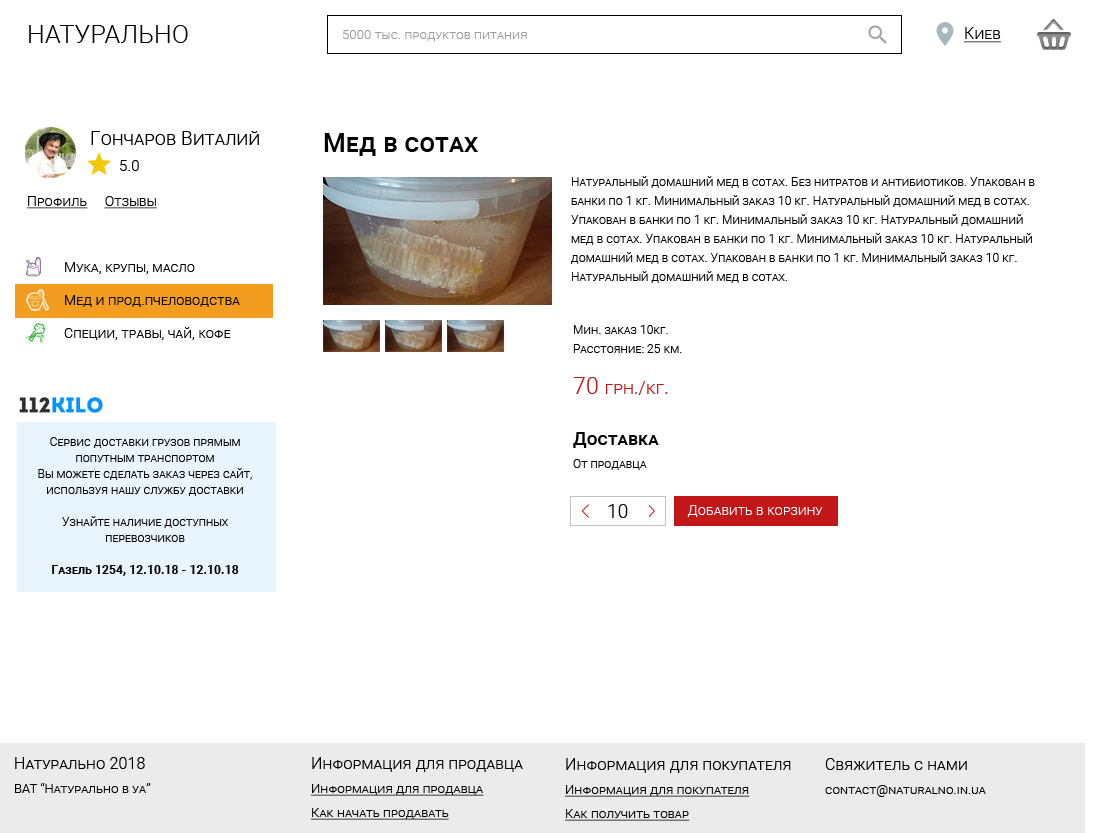
<style>
.page{position:relative;width:1098px;height:833px;background:#ffffff}
.page>*{position:absolute;margin:0}
.t1{font:25px "Roboto-Light";letter-spacing:0.01em;color:#000000;font-variant:small-caps}
.t2{font:13px "Roboto-Light";letter-spacing:0.01em;color:#9d9d9d;font-variant:small-caps}
.t3{font:16px "Roboto-Light";letter-spacing:0.01em;color:#000000;font-variant:small-caps;text-decoration:underline}
.t4{font:19px "Roboto-Light";letter-spacing:0.01em;color:#000000;font-variant:small-caps}
.t5{font:26px "Roboto-Medium";letter-spacing:0.01em;color:#000000;font-variant:small-caps}
.t6{font:15px "Roboto-Light";letter-spacing:0.01em;color:#000000;font-variant:small-caps}
.t7{font:12px/19px "Roboto-Light";letter-spacing:0.01em;color:#000000;font-variant:small-caps}
.t8{font:12px/33px "Roboto-Light";letter-spacing:0.01em;color:#000000;font-variant:small-caps}
.t9{font:14px "Roboto-Light";letter-spacing:0.01em;color:#000000;font-variant:small-caps;text-decoration:underline}
.t10{font:14px/33px "Roboto-Light";letter-spacing:0.01em;color:#000000;font-variant:small-caps}
.t11{font:18px "Roboto-Light";letter-spacing:0.01em;color:#c21719;font-variant:small-caps}
.t12{font:23px "Roboto-Light";letter-spacing:0.01em;color:#c21719;font-variant:small-caps}
.t13{font:12px/16px "Roboto-Light";letter-spacing:0.01em;color:#000000;font-variant:small-caps}
.t14{font:12px/16px "Roboto-Bold";letter-spacing:0.01em;color:#000000;font-variant:small-caps}
.t15{font:12px/23px "Roboto-Light";letter-spacing:0.01em;color:#000000;font-variant:small-caps}
.t16{font:18px/19px "Roboto-Medium";letter-spacing:0.01em;color:#000000;font-variant:small-caps}
.t17{font:14px "Roboto-Light";letter-spacing:0.01em;color:#ffffff;font-variant:small-caps}
.t18{font:13px/24px "Roboto-Light";letter-spacing:0.01em;color:#000000;font-variant:small-caps}
.t19{font:16px/26px "Roboto-Light";letter-spacing:0.01em;color:#000000;font-variant:small-caps}
.t20{font:13px/24px "Roboto-Light";letter-spacing:0.01em;color:#000000;font-variant:small-caps;text-decoration:underline}
</style>
<div class="page">
<p class="t1" style="left:29px;top:25px;width:159px;height:18px">НАТУРАЛЬНО</p>
<p class="t2" style="left:342px;top:30px;width:185px;height:11px">5000 тыс. продуктов питания</p>
<p class="t3" style="left:964px;top:27px;width:37px;height:16px">Киев</p>
<p class="t4" style="left:91px;top:131px;width:168px;height:14px">Гончаров Виталий</p>
<p class="t5" style="left:324px;top:133px;width:154px;height:23px">Мед в сотах</p>
<p class="t6" style="left:120px;top:160px;width:19px;height:11px">5.0</p>
<p class="t7" style="left:571px;top:176px;width:464px;height:107px"><span class="t8">Натуральный</span> домашний мед в сотах. Без нитратов и антибиотиков. Упакован в банки по 1 кг. Минимальный заказ 10 кг. Натуральный домашний мед в сотах. Упакован в банки по 1 кг. Минимальный заказ 10 кг. Натуральный домашний мед в сотах. Упакован в банки по 1 кг. Минимальный заказ 10 кг. Натуральный домашний мед в сотах. Упакован в банки по 1 кг. Минимальный заказ 10 кг. Натуральный домашний мед в сотах.</p>
<p class="t9" style="left:27px;top:196px;width:130px;height:13px">Профиль     Отзывы</p>
<p class="t10" style="left:64px;top:262px;width:176px;height:78px">Мука, крупы, масло<br>Мед и прод.пчеловодства<br>Специи, травы, чай, кофе</p>
<p class="t7" style="left:573px;top:325px;width:109px;height:28px">Мин. заказ 10кг.<br>Расстояние: 25 км.</p>
<p class="t11" style="left:573px;top:377px;width:95px;height:18px"><span class="t12">70 </span>грн./кг.</p>
<p class="t13" style="left:38px;top:437px;width:214px;height:139px;text-align:center">Сервис доставки грузов прямым попутным транспортом<br>Вы можете сделать заказ через сайт, используя нашу службу доставки<br><br>Узнайте наличие доступных перевозчиков<br><br><span class="t14">Газель 1254, 12.10.18 - 12.10.18</span></p>
<p class="t15" style="left:573px;top:432px;width:86px;height:38px"><span class="t16">Доставка<br></span>От продавца</p>
<p class="t4" style="left:608px;top:504px;width:20px;height:14px">10</p>
<p class="t17" style="left:687px;top:505px;width:136px;height:12px">Добавить в корзину</p>
<p class="t18" style="left:15px;top:757px;width:136px;height:36px"><span class="t19">Натурально 2018<br></span>ВАТ “Натурально в уа”</p>
<p class="t20" style="left:311px;top:757px;width:212px;height:63px"><span class="t19">Информация для продавца<br></span>Информация для продавца<br>Как начать продавать</p>
<p class="t20" style="left:565px;top:758px;width:226px;height:63px"><span class="t19">Информация для покупателя<br></span>Информация для покупателя<br>Как получить товар</p>
<p class="t18" style="left:825px;top:758px;width:161px;height:39px"><span class="t19">Свяжитель с нами<br></span>contact@naturalno.in.ua</p>
</div>
